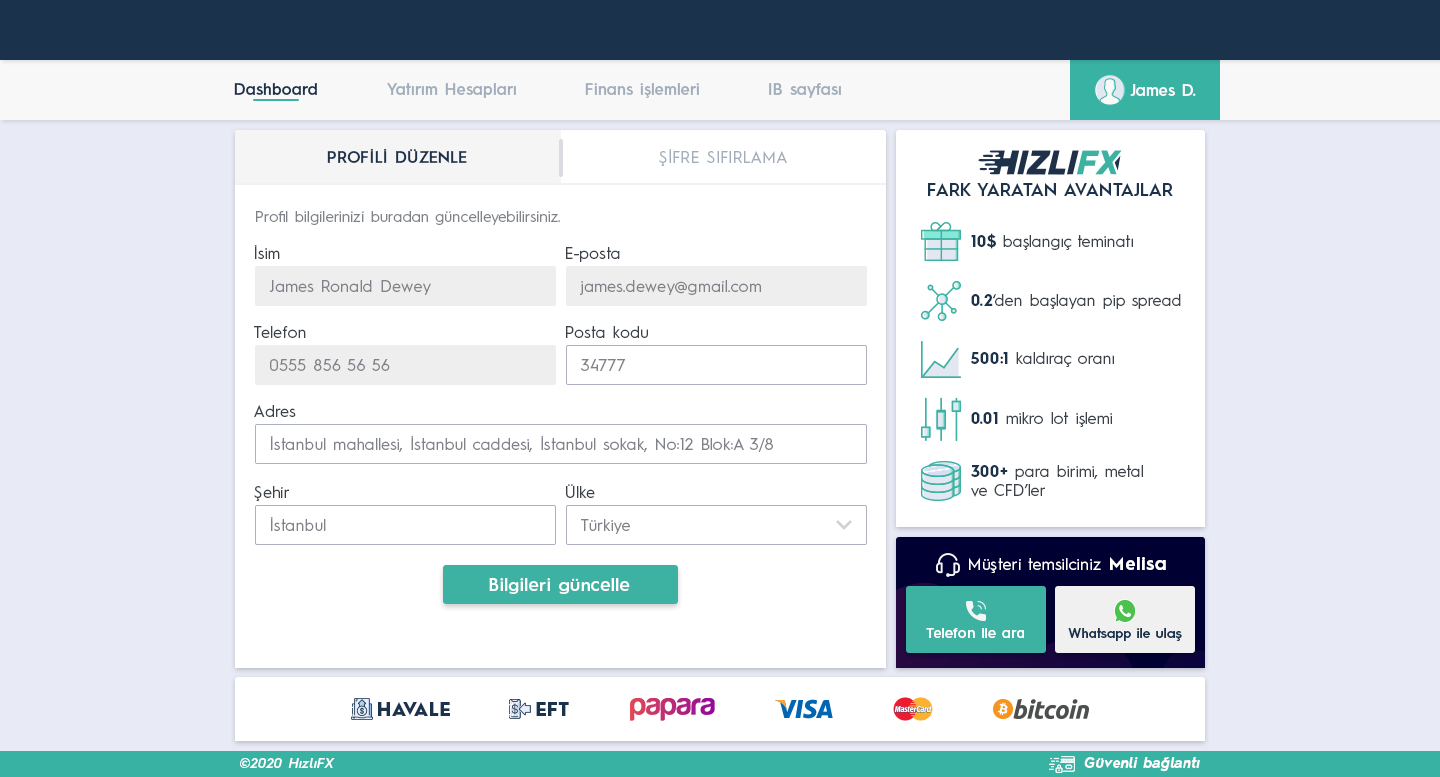
<style>
.page{position:relative;width:1440px;height:777px;background:#ffffff}
.page>*{position:absolute;margin:0}
.t1{font:16px "HurmeGeometricSans3-SemiBold";color:#1a324c}
.t2{font:16px "HurmeGeometricSans3-SemiBold";color:#a1adbb}
.t3{font:16px "HurmeGeometricSans3-SemiBold";color:#fefefe}
.t4{font:16px "HurmeGeometricSans1-SemiBold";letter-spacing:0.01em;color:#1a324c}
.t5{font:16px "HurmeGeometricSans1-Regular";letter-spacing:0.01em;color:#a1adbb}
.t6{font:18px "HurmeGeometricSans1-SemiBold";color:#1a324c}
.t7{font:15px "HurmeGeometricSans1-Regular";letter-spacing:0.01em;color:#7f8389}
.t8{font:16px "HurmeGeometricSans1-Regular";color:#3a4149}
.t9{font:16px "HurmeGeometricSans1-Bold";color:#1a324c}
.t10{font:16px "HurmeGeometricSans1-Regular";letter-spacing:0.01em;color:#3a4149}
.t11{font:16px "HurmeGeometricSans1-Regular";letter-spacing:0.01em;color:#7f8389}
.t12{font:16px "HurmeGeometricSans1-Regular";letter-spacing:0.025em;color:#ffffff}
.t13{font:18px "HurmeGeometricSans1-Bold";letter-spacing:0.05em;color:#ffffff}
.t14{font:18px "HurmeGeometricSans1-SemiBold";letter-spacing:0.025em;color:#ffffff}
.t15{font:14px "HurmeGeometricSans3-SemiBold";letter-spacing:0.01em;color:#ffffff}
.t16{font:13.5px "HurmeGeometricSans3-SemiBold";letter-spacing:0.01em;color:#1a324c}
.t17{font:18px "HurmeGeometricSans1-Black";letter-spacing:0.025em;color:#1a324c}
.t18{font:14px "HurmeGeometricSans2-SemiBoldObl";letter-spacing:0.025em;color:#ffffff}
.t19{font:14px "HurmeGeometricSans2-BoldObl";letter-spacing:0.025em;color:#ffffff}
</style>
<div class="page">
<p class="t1" style="left:234px;top:83px;width:83px;height:12px">Dashboard</p>
<p class="t2" style="left:387px;top:83px;width:129px;height:15px">Yatırım Hesapları</p>
<p class="t2" style="left:585px;top:83px;width:114px;height:15px">Finans işlemleri</p>
<p class="t2" style="left:769px;top:83px;width:72px;height:15px">IB sayfası</p>
<p class="t3" style="left:1130px;top:84px;width:66px;height:12px">James D.</p>
<p class="t4" style="left:327px;top:148px;width:140px;height:15px">PROFİLİ DÜZENLE</p>
<p class="t5" style="left:659px;top:149px;width:128px;height:17px">ŞİFRE SIFIRLAMA</p>
<p class="t6" style="left:928px;top:183px;width:245px;height:13px">FARK YARATAN AVANTAJLAR</p>
<p class="t7" style="left:256px;top:211px;width:304px;height:14px">Profil bilgilerinizi buradan güncelleyebilirsiniz.</p>
<p class="t8" style="left:971px;top:233px;width:162px;height:17px"><span class="t9">10$</span> başlangıç teminatı</p>
<p class="t10" style="left:254px;top:245px;width:26px;height:14px">İsim</p>
<p class="t10" style="left:566px;top:247px;width:54px;height:15px">E-posta</p>
<p class="t11" style="left:269px;top:280px;width:162px;height:15px">James Ronald Dewey</p>
<p class="t11" style="left:580px;top:280px;width:181px;height:15px">james.dewey@gmail.com</p>
<p class="t8" style="left:971px;top:294px;width:210px;height:15px"><span class="t9">0.2</span>‘den başlayan pip spread</p>
<p class="t10" style="left:254px;top:326px;width:52px;height:12px">Telefon</p>
<p class="t10" style="left:566px;top:326px;width:82px;height:12px">Posta kodu</p>
<p class="t8" style="left:970px;top:352px;width:144px;height:15px"><span class="t9">500:1</span> kaldıraç oranı</p>
<p class="t11" style="left:270px;top:359px;width:120px;height:12px">0555 856 56 56</p>
<p class="t11" style="left:580px;top:359px;width:46px;height:12px">34777</p>
<p class="t10" style="left:254px;top:405px;width:42px;height:12px">Adres</p>
<p class="t8" style="left:971px;top:412px;width:141px;height:15px"><span class="t9">0.01</span> mikro lot işlemi</p>
<p class="t11" style="left:270px;top:436px;width:503px;height:17px">İstanbul mahallesi, İstanbul caddesi, İstanbul sokak, No:12 Blok:A 3/8</p>
<p class="t8" style="left:971px;top:465px;width:172px;height:32px"><span class="t9">300+</span> para birimi, metal<br>ve CFD’ler</p>
<p class="t10" style="left:254px;top:486px;width:35px;height:15px">Şehir</p>
<p class="t10" style="left:566px;top:484px;width:29px;height:14px">Ülke</p>
<p class="t11" style="left:270px;top:517px;width:56px;height:14px">İstanbul</p>
<p class="t11" style="left:581px;top:519px;width:49px;height:15px">Türkiye</p>
<p class="t12" style="left:969px;top:557px;width:197px;height:16px">Müşteri temsilciniz <span class="t13">Melisa</span></p>
<p class="t14" style="left:489px;top:578px;width:141px;height:16px">Bilgileri güncelle</p>
<p class="t15" style="left:926px;top:628px;width:98px;height:10px">Telefon ile ara</p>
<p class="t16" style="left:1068px;top:628px;width:114px;height:13px">Whatsapp ile ulaş</p>
<p class="t17" style="left:378px;top:702px;width:72px;height:14px">HAVALE</p>
<p class="t17" style="left:536px;top:702px;width:33px;height:14px">EFT</p>
<p class="t18" style="left:240px;top:758px;width:95px;height:10px">©2020 HızlıFX</p>
<p class="t19" style="left:1084px;top:757px;width:116px;height:15px">Güvenli bağlantı</p>
</div>
